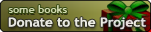
<style>
.page{position:relative;width:151px;height:32px}
.page>*{position:absolute;margin:0}
.t1{font:9.9px "TrebuchetMS-Bold";letter-spacing:-0.005em;color:#ccd3ac;scale:1.11 1}
.t2{font:12.6px "TrebuchetMS-Bold";letter-spacing:-0.005em;color:#e8e8e0;scale:1.11 1}
</style>
<div class="page">
<p class="t1" style="left:8px;top:5px;width:59px;height:8px">some books</p>
<p class="t2" style="left:8px;top:17px;width:138px;height:13px">Donate to the Project</p>
</div>
